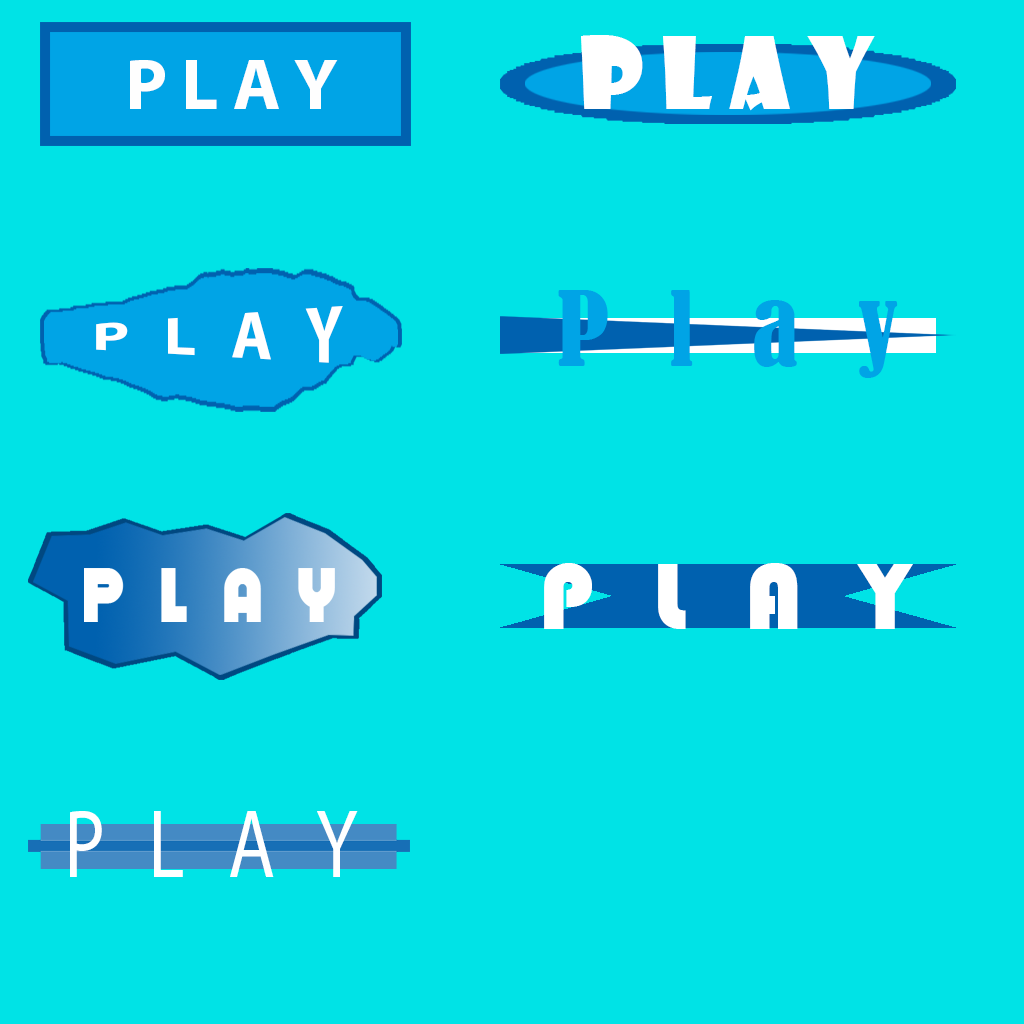
<style>
.page{position:relative;width:1024px;height:1024px;background:#00e3e6}
.page>*{position:absolute;margin:0}
.t1{font:97px "ShowcardGothic-Reg";letter-spacing:0.18em;color:#ffffff}
.t2{font:72.9px "MyriadPro-Bold";letter-spacing:0.18em;color:#fefefe}
.t3{font:62.9px "MyriadPro-Bold";letter-spacing:0.18em;color:#ffffff}
.t4{font:65.1px "Oilrig";letter-spacing:0.18em;color:#ffffff;scale:0.88 1}
.t5{font:97px "Bauhaus93";letter-spacing:0.18em;color:#ffffff}
.t6{font:97.2px "MyriadPro-Regular";letter-spacing:0.18em;color:#ffffff;scale:0.79 1}
</style>
<div class="page">
<p class="t1" style="left:581px;top:35px;width:294px;height:76px">play</p>
<p class="t2" style="left:130px;top:60px;width:208px;height:49px">PLAY</p>
<p class="t3" style="left:96px;top:306px;width:247px;height:57px">P L A Y</p>
<p class="t4" style="left:84px;top:568px;width:251px;height:54px">P L A Y</p>
<p class="t5" style="left:544px;top:563px;width:369px;height:66px">P L A Y</p>
<p class="t6" style="left:70px;top:811px;width:288px;height:66px">P L A Y</p>
</div>
